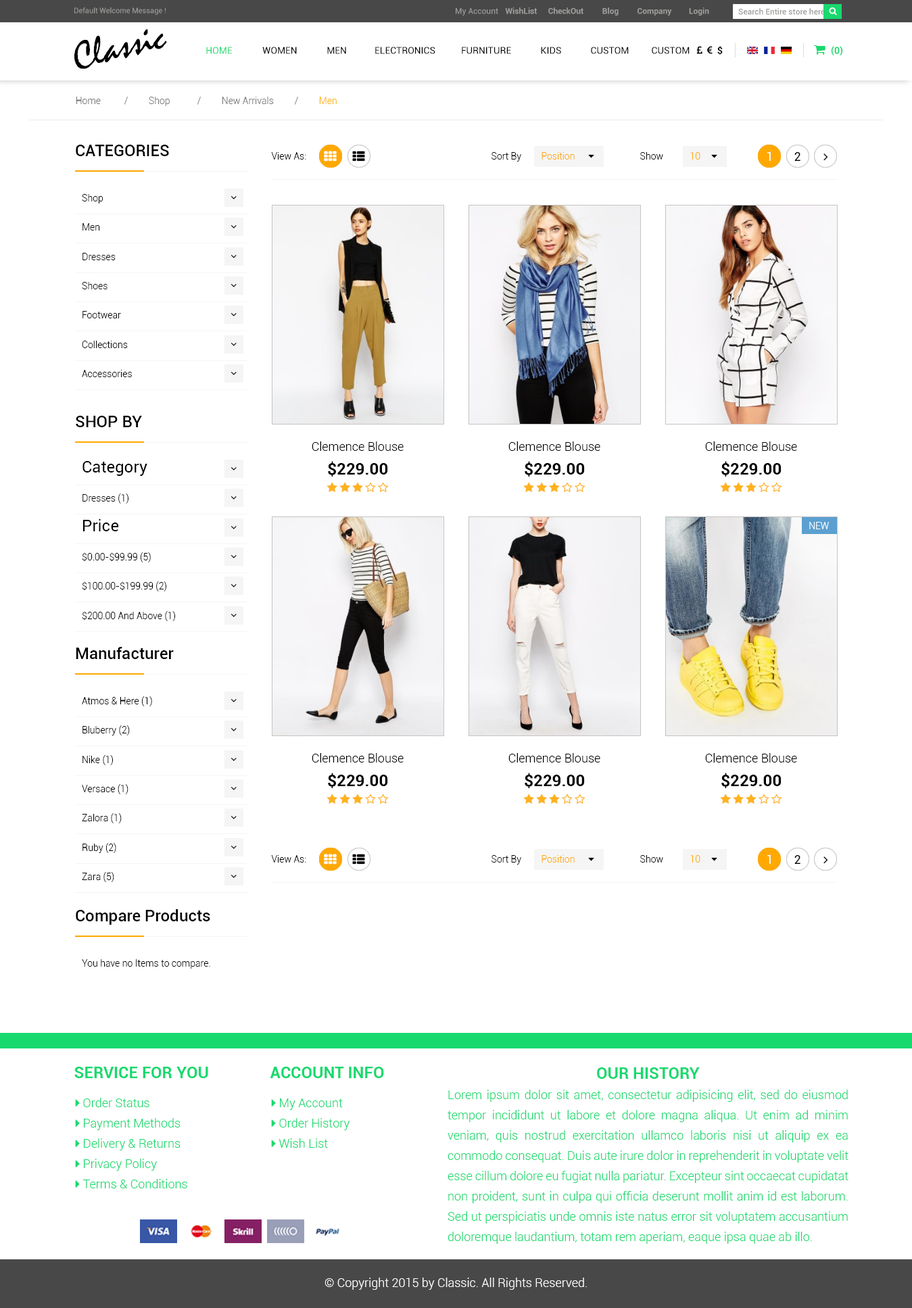
<style>
.page{position:relative;width:912px;height:1308px;background:#ffffff}
.page>*{position:absolute;margin:0}
.t1{font:7.4px "Roboto-Regular";color:#9f9e9c}
.t2{font:8.1px "Roboto-Regular";color:#9f9e9c}
.t3{font:8.1px "Roboto-Bold";color:#9f9e9c}
.t4{font:8.1px "Roboto-Medium";color:#9f9e9c}
.t5{font:40.6px "Mistral";color:#000000}
.t6{font:9.5px "Roboto-Regular";color:#18d96e}
.t7{font:9.5px "Roboto-Regular";color:#000000}
.t8{font:9.5px "Roboto-Bold";color:#18d96e}
.t9{font:9.5px "Roboto-Light";color:#777777}
.t10{font:9.5px "Roboto-Light";color:#ffb209}
.t11{font:16.2px "Roboto-Medium";color:#000000}
.t12{font:9.5px "Roboto-Light";color:#000000}
.t13{font:9.5px "Roboto-Light";color:#ffa800}
.t14{font:12.2px "Roboto-Regular";color:#ffffff}
.t15{font:12.2px "Roboto-Regular";color:#000000}
.t16{font:12.2px "Roboto-Light";color:#000000}
.t17{font:16.2px "Roboto-Regular";color:#000000}
.t18{font:16.2px "Roboto-Bold";color:#000000}
.t19{font:9.5px "Roboto-Light";color:#ffffff}
.t20{font:16.2px "Roboto-Bold";color:#18d96e}
.t21{font:12.2px/20.3px "Roboto-Light";color:#18d96e}
.t22{font:16.2px/20.3px "Roboto-Bold";color:#18d96e}
.t23{font:12.2px "Roboto-Light";color:#ffffff}
</style>
<div class="page">
<p class="t1" style="left:74px;top:7px;width:92px;height:8px">Default Welcome Message !</p>
<p class="t2" style="left:456px;top:8px;width:42px;height:8px">My Account</p>
<p class="t3" style="left:505px;top:7px;width:32px;height:7px">WishList</p>
<p class="t3" style="left:548px;top:7px;width:35px;height:7px">CheckOut</p>
<p class="t3" style="left:602px;top:7px;width:16px;height:9px">Blog</p>
<p class="t3" style="left:637px;top:8px;width:35px;height:8px">Company</p>
<p class="t3" style="left:689px;top:7px;width:20px;height:9px">Login</p>
<p class="t4" style="left:738px;top:8px;width:87px;height:7px">Search Entire store here</p>
<p class="t5" style="left:74px;top:29px;width:93px;height:40px;rotate:-15deg">Classic</p>
<p class="t6" style="left:206px;top:47px;width:27px;height:7px">HOME</p>
<p class="t7" style="left:262px;top:47px;width:35px;height:7px">WOMEN</p>
<p class="t7" style="left:327px;top:47px;width:19px;height:7px">MEN</p>
<p class="t7" style="left:375px;top:47px;width:60px;height:7px">ELECTRONICS</p>
<p class="t7" style="left:462px;top:47px;width:49px;height:7px">FURNITURE</p>
<p class="t7" style="left:541px;top:47px;width:20px;height:7px">KIDS</p>
<p class="t7" style="left:591px;top:47px;width:38px;height:7px">CUSTOM</p>
<p class="t7" style="left:652px;top:47px;width:37px;height:7px">CUSTOM</p>
<p class="t8" style="left:831px;top:46px;width:11px;height:10px">(0)</p>
<p class="t9" style="left:76px;top:97px;width:261px;height:9px">Home  / Shop  / New Arrivals / <span class="t10">Men</span></p>
<p class="t11" style="left:76px;top:145px;width:93px;height:11px">CATEGORIES</p>
<p class="t12" style="left:271px;top:152px;width:35px;height:8px">View As:</p>
<p class="t12" style="left:491px;top:152px;width:30px;height:10px">Sort By</p>
<p class="t13" style="left:541px;top:152px;width:33px;height:8px">Position</p>
<p class="t12" style="left:640px;top:152px;width:23px;height:8px">Show</p>
<p class="t13" style="left:690px;top:152px;width:10px;height:8px">10</p>
<p class="t14" style="left:767px;top:151px;width:4px;height:10px">1</p>
<p class="t15" style="left:794px;top:152px;width:6px;height:9px">2</p>
<p class="t12" style="left:82px;top:194px;width:21px;height:9px">Shop</p>
<p class="t12" style="left:82px;top:223px;width:18px;height:7px">Men</p>
<p class="t12" style="left:82px;top:253px;width:34px;height:7px">Dresses</p>
<p class="t12" style="left:82px;top:282px;width:25px;height:7px">Shoes</p>
<p class="t12" style="left:82px;top:311px;width:39px;height:7px">Footwear</p>
<p class="t12" style="left:82px;top:341px;width:46px;height:7px">Collections</p>
<p class="t12" style="left:82px;top:370px;width:50px;height:7px">Accessories</p>
<p class="t11" style="left:76px;top:416px;width:66px;height:11px">SHOP BY</p>
<p class="t16" style="left:312px;top:441px;width:92px;height:10px">Clemence Blouse</p>
<p class="t16" style="left:508px;top:441px;width:92px;height:10px">Clemence Blouse</p>
<p class="t16" style="left:705px;top:441px;width:92px;height:10px">Clemence Blouse</p>
<p class="t17" style="left:82px;top:461px;width:65px;height:15px">Category</p>
<p class="t18" style="left:328px;top:461px;width:60px;height:15px">$229.00</p>
<p class="t18" style="left:524px;top:461px;width:61px;height:15px">$229.00</p>
<p class="t18" style="left:721px;top:461px;width:60px;height:15px">$229.00</p>
<p class="t12" style="left:82px;top:493px;width:46px;height:11px">Dresses (1)</p>
<p class="t17" style="left:83px;top:519px;width:36px;height:12px">Price</p>
<p class="t19" style="left:809px;top:522px;width:20px;height:7px">NEW</p>
<p class="t12" style="left:82px;top:552px;width:69px;height:10px">$0.00-$99.99 (5)</p>
<p class="t12" style="left:82px;top:581px;width:84px;height:10px">$100.00-$199.99 (2)</p>
<p class="t12" style="left:82px;top:611px;width:93px;height:10px">$200.00 And Above (1)</p>
<p class="t11" style="left:76px;top:647px;width:98px;height:12px">Manufacturer</p>
<p class="t12" style="left:82px;top:696px;width:70px;height:10px">Atmos &amp; Here (1)</p>
<p class="t12" style="left:82px;top:725px;width:48px;height:10px">Bluberry (2)</p>
<p class="t12" style="left:82px;top:755px;width:31px;height:10px">Nike (1)</p>
<p class="t16" style="left:312px;top:753px;width:92px;height:9px">Clemence Blouse</p>
<p class="t16" style="left:508px;top:753px;width:92px;height:9px">Clemence Blouse</p>
<p class="t16" style="left:705px;top:753px;width:92px;height:9px">Clemence Blouse</p>
<p class="t18" style="left:328px;top:773px;width:60px;height:15px">$229.00</p>
<p class="t18" style="left:524px;top:773px;width:61px;height:15px">$229.00</p>
<p class="t18" style="left:721px;top:773px;width:60px;height:15px">$229.00</p>
<p class="t12" style="left:82px;top:784px;width:46px;height:10px">Versace (1)</p>
<p class="t12" style="left:82px;top:813px;width:40px;height:10px">Zalora (1)</p>
<p class="t12" style="left:82px;top:843px;width:34px;height:10px">Ruby (2)</p>
<p class="t12" style="left:271px;top:855px;width:35px;height:7px">View As:</p>
<p class="t12" style="left:491px;top:855px;width:30px;height:9px">Sort By</p>
<p class="t13" style="left:541px;top:855px;width:33px;height:7px">Position</p>
<p class="t12" style="left:640px;top:855px;width:23px;height:7px">Show</p>
<p class="t13" style="left:690px;top:855px;width:10px;height:7px">10</p>
<p class="t14" style="left:767px;top:854px;width:4px;height:10px">1</p>
<p class="t15" style="left:794px;top:855px;width:6px;height:9px">2</p>
<p class="t12" style="left:82px;top:872px;width:32px;height:10px">Zara (5)</p>
<p class="t11" style="left:76px;top:909px;width:134px;height:16px">Compare Products</p>
<p class="t12" style="left:82px;top:959px;width:128px;height:10px">You have no Items to compare.</p>
<p class="t20" style="left:74px;top:1067px;width:134px;height:11px">SERVICE FOR YOU</p>
<p class="t20" style="left:270px;top:1067px;width:114px;height:11px">ACCOUNT INFO</p>
<p class="t21" style="left:447px;top:1067px;width:401px;height:177px;text-align:center"><span class="t22">OUR HISTORY<br></span>Lorem ipsum dolor sit amet, consectetur adipisicing elit, sed do eiusmod tempor incididunt ut labore et dolore magna aliqua. Ut enim ad minim veniam, quis nostrud exercitation ullamco laboris nisi ut aliquip ex ea commodo consequat. Duis aute irure dolor in reprehenderit in voluptate velit esse cillum dolore eu fugiat nulla pariatur. Excepteur sint occaecat cupidatat non proident, sunt in culpa qui officia deserunt mollit anim id est laborum. Sed ut perspiciatis unde omnis iste natus error sit voluptatem accusantium doloremque laudantium, totam rem aperiam, eaque ipsa quae ab illo.</p>
<p class="t23" style="left:324px;top:1277px;width:263px;height:13px">© Copyright 2015 by Classic. All Rights Reserved.</p>
</div>
